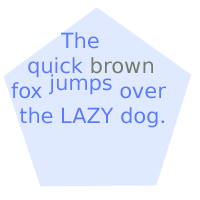
<style>
.page{position:relative;width:200px;height:200px;background:#dfe9ff}
.page>*{position:absolute;margin:0}
.t1{font:20.8px "DejaVuSans";color:#5b7aff}
.t2{font:20.8px "DejaVuSans";letter-spacing:0.01em;color:#747c65}
.t3{font:20.8px "DejaVuSans";color:#5b7aff;text-transform:uppercase}
</style>
<div class="page">
<p class="t1" style="left:11px;top:32px;width:155px;height:96px">The quick <span class="t2">brown</span> fox jumps over the <span class="t3">lazy</span> dog.</p>
</div>
